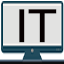
<style>
.page{position:relative;width:64px;height:64px;background:#e2e2e1}
.page>*{position:absolute;margin:0}
.t1{font:48px "GillSansMT";color:#060000}
</style>
<div class="page">
<p class="t1" style="left:19px;top:9px;width:38px;height:34px">IT</p>
</div>
